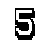
<style>
.page{position:relative;width:48px;height:48px;background:#ffffff}
.page>*{position:absolute;margin:0}
.t1{font:36px "KarmaFuture-Regular";color:#010101}
</style>
<div class="page">
<p class="t1" style="left:15px;top:8px;width:20px;height:32px">5</p>
</div>
